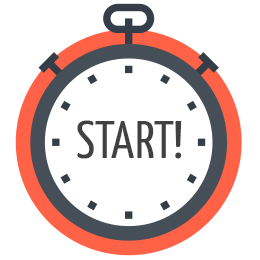
<style>
.page{position:relative;width:260px;height:260px;background:#ffffff}
.page>*{position:absolute;margin:0}
.t1{font:52.9px "YanoneKaffeesatz-Regular";color:#414141}
</style>
<div class="page">
<p class="t1" style="left:77px;top:120px;width:105px;height:39px">START!</p>
</div>
